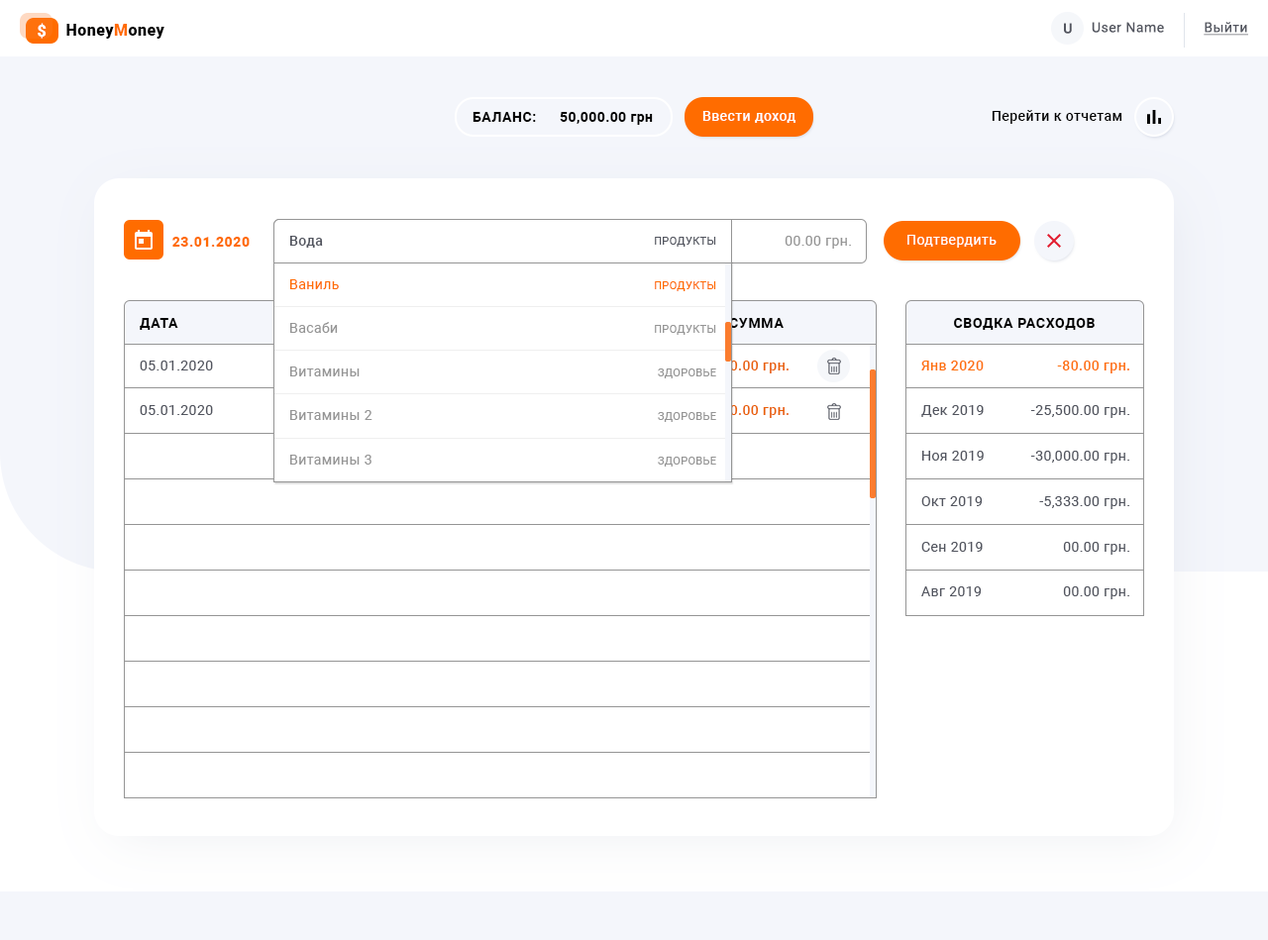
<style>
.page{position:relative;width:1268px;height:940px;background:#ffffff}
.page>*{position:absolute;margin:0}
.t1{font:15.9px "Roboto-Black";letter-spacing:0.03em;color:#ffffff}
.t2{font:15.9px "Roboto-Black";letter-spacing:0.03em;color:#000000}
.t3{font:15.9px "Roboto-Black";letter-spacing:0.03em;color:#ff6c00}
.t4{font:13.9px "Roboto-Medium";letter-spacing:0.035em;color:#52555f}
.t5{font:13.9px "Roboto-Regular";letter-spacing:0.035em;color:#52555f}
.t6{font:13.9px "Roboto-Regular";letter-spacing:0.03em;color:#52555f;text-decoration:underline}
.t7{font:13.9px "Roboto-Bold";letter-spacing:0.04em;color:#000000;text-transform:uppercase}
.t8{font:13.9px "Roboto-Bold";letter-spacing:0.03em;color:#000000}
.t9{font:13.9px "Roboto-Medium";letter-spacing:0.03em;color:#ffffff}
.t10{font:13.9px "Roboto-Medium";letter-spacing:0.03em;color:#000000}
.t11{font:13.9px "Roboto-Black";letter-spacing:0.04em;color:#ff6c00}
.t12{font:13.9px "Roboto-Medium";letter-spacing:0.03em;color:#52555f}
.t13{font:10.9px "Roboto-Regular";letter-spacing:0.03em;color:#52555f;text-transform:uppercase}
.t14{font:13.9px "Roboto-Regular";letter-spacing:0.03em;color:#959595}
.t15{font:13.9px "Roboto-Regular";letter-spacing:0.03em;color:#ffffff}
.t16{font:13.9px "Roboto-Regular";letter-spacing:0.03em;color:#ff6c00}
.t17{font:10.9px "Roboto-Regular";letter-spacing:0.03em;color:#ff6c00;text-transform:uppercase}
.t18{font:13.9px "Roboto-Bold";letter-spacing:0.05em;color:#000000;text-transform:uppercase}
.t19{font:10.9px "Roboto-Regular";letter-spacing:0.03em;color:#959595;text-transform:uppercase}
.t20{font:13.9px "Roboto-Regular";letter-spacing:0.03em;color:#52555f}
.t21{font:13.9px "Roboto-Medium";letter-spacing:0.03em;color:#e96105}
.t22{font:13.9px "Roboto-Medium";letter-spacing:0.03em;color:#fe710d}
</style>
<div class="page">
<p class="t1" style="left:38px;top:23px;width:9px;height:16px">$</p>
<p class="t2" style="left:66px;top:24px;width:98px;height:15px">Honey<span class="t3">M</span>oney</p>
<p class="t4" style="left:1064px;top:23px;width:8px;height:11px">U</p>
<p class="t5" style="left:1092px;top:22px;width:72px;height:11px">User Name</p>
<p class="t6" style="left:1204px;top:22px;width:44px;height:14px">Выйти</p>
<p class="t7" style="left:473px;top:112px;width:63px;height:10px">баланс:</p>
<p class="t8" style="left:560px;top:112px;width:93px;height:13px">50,000.00 грн</p>
<p class="t9" style="left:702px;top:111px;width:94px;height:12px">Ввести доход</p>
<p class="t10" style="left:992px;top:110px;width:131px;height:14px">Перейти к отчетам</p>
<p class="t11" style="left:172px;top:237px;width:78px;height:10px">23.01.2020</p>
<p class="t12" style="left:289px;top:236px;width:34px;height:12px">Вода</p>
<p class="t13" style="left:655px;top:237px;width:61px;height:10px">Продукты</p>
<p class="t14" style="left:785px;top:236px;width:66px;height:13px">00.00 грн.</p>
<p class="t15" style="left:908px;top:235px;width:89px;height:13px">Подтвердить</p>
<p class="t16" style="left:290px;top:279px;width:49px;height:10px">Ваниль</p>
<p class="t17" style="left:655px;top:281px;width:61px;height:10px">Продукты</p>
<p class="t18" style="left:140px;top:318px;width:38px;height:12px">Дата</p>
<p class="t14" style="left:290px;top:322px;width:48px;height:11px">Васаби</p>
<p class="t19" style="left:655px;top:325px;width:61px;height:10px">Продукты</p>
<p class="t18" style="left:729px;top:318px;width:55px;height:10px">Сумма</p>
<p class="t18" style="left:954px;top:318px;width:141px;height:12px">Сводка расходов</p>
<p class="t20" style="left:140px;top:361px;width:73px;height:10px">05.01.2020</p>
<p class="t21" style="left:712px;top:361px;width:77px;height:13px">- 30.00 грн.</p>
<p class="t22" style="left:921px;top:361px;width:63px;height:10px">Янв 2020</p>
<p class="t22" style="left:1057px;top:361px;width:72px;height:13px">-80.00 грн.</p>
<p class="t14" style="left:290px;top:367px;width:70px;height:9px">Витамины</p>
<p class="t19" style="left:658px;top:369px;width:58px;height:9px">Здоровье</p>
<p class="t20" style="left:140px;top:405px;width:73px;height:10px">05.01.2020</p>
<p class="t14" style="left:290px;top:410px;width:83px;height:10px">Витамины 2</p>
<p class="t19" style="left:658px;top:412px;width:58px;height:10px">Здоровье</p>
<p class="t21" style="left:712px;top:405px;width:77px;height:13px">- 50.00 грн.</p>
<p class="t20" style="left:921px;top:405px;width:63px;height:12px">Дек 2019</p>
<p class="t20" style="left:1030px;top:405px;width:99px;height:13px">-25,500.00 грн.</p>
<p class="t14" style="left:290px;top:455px;width:82px;height:10px">Витамины 3</p>
<p class="t19" style="left:658px;top:457px;width:58px;height:10px">Здоровье</p>
<p class="t20" style="left:922px;top:451px;width:62px;height:10px">Ноя 2019</p>
<p class="t20" style="left:1030px;top:451px;width:99px;height:13px">-30,000.00 грн.</p>
<p class="t20" style="left:921px;top:496px;width:62px;height:10px">Окт 2019</p>
<p class="t20" style="left:1039px;top:496px;width:90px;height:13px">-5,333.00 грн.</p>
<p class="t20" style="left:921px;top:542px;width:62px;height:10px">Сен 2019</p>
<p class="t20" style="left:1063px;top:542px;width:66px;height:13px">00.00 грн.</p>
<p class="t20" style="left:921px;top:587px;width:61px;height:9px">Авг 2019</p>
<p class="t20" style="left:1063px;top:587px;width:66px;height:12px">00.00 грн.</p>
</div>
